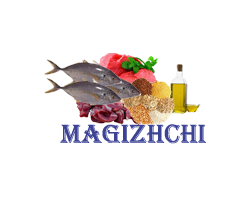
<style>
.page{position:relative;width:251px;height:201px;background:#ffffff}
.page>*{position:absolute;margin:0}
.t1{font:26.8px "Algerian";color:#3c4395}
</style>
<div class="page">
<p class="t1" style="left:60px;top:124px;width:146px;height:20px">Magizhchi</p>
</div>
